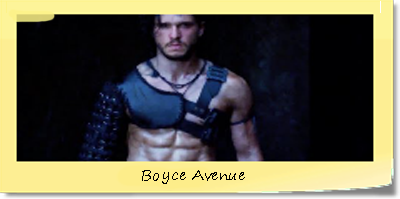
<style>
.page{position:relative;width:400px;height:199px}
.page>*{position:absolute;margin:0}
.t1{font:14.1px "SegoePrint";letter-spacing:-0.01em;color:#000000;scale:1.1 1}
</style>
<div class="page">
<p class="t1" style="left:142px;top:170px;width:103px;height:14px">Boyce Avenue</p>
</div>
